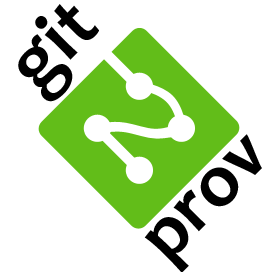
<style>
.page{position:relative;width:272px;height:272px;background:#ffffff}
.page>*{position:absolute;margin:0}
.t1{font:77.6px "Candara-Bold";color:#000000}
.t2{font:74.9px "Candara-Bold";color:#000000}
</style>
<div class="page">
<p class="t1" style="left:18px;top:4px;width:81px;height:98px;rotate:-45deg">git</p>
<p class="t2" style="left:144px;top:134px;width:118px;height:139px;rotate:-45deg">prov</p>
</div>
